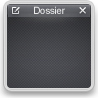
<style>
.page{position:relative;width:98px;height:98px}
.page>*{position:absolute;margin:0}
.t1{font:10px "ArialMT";letter-spacing:-0.04em;color:#eaeaeb}
</style>
<div class="page">
<p class="t1" style="left:34px;top:6px;width:31px;height:8px">Dossier</p>
</div>
